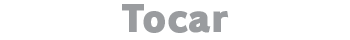
<style>
.page{position:relative;width:350px;height:40px;background:#ffffff}
.page>*{position:absolute;margin:0}
.t1{font:36px "RodinPro-UB";color:#9a9c9f}
</style>
<div class="page">
<p class="t1" style="left:122px;top:4px;width:107px;height:29px">Tocar</p>
</div>
